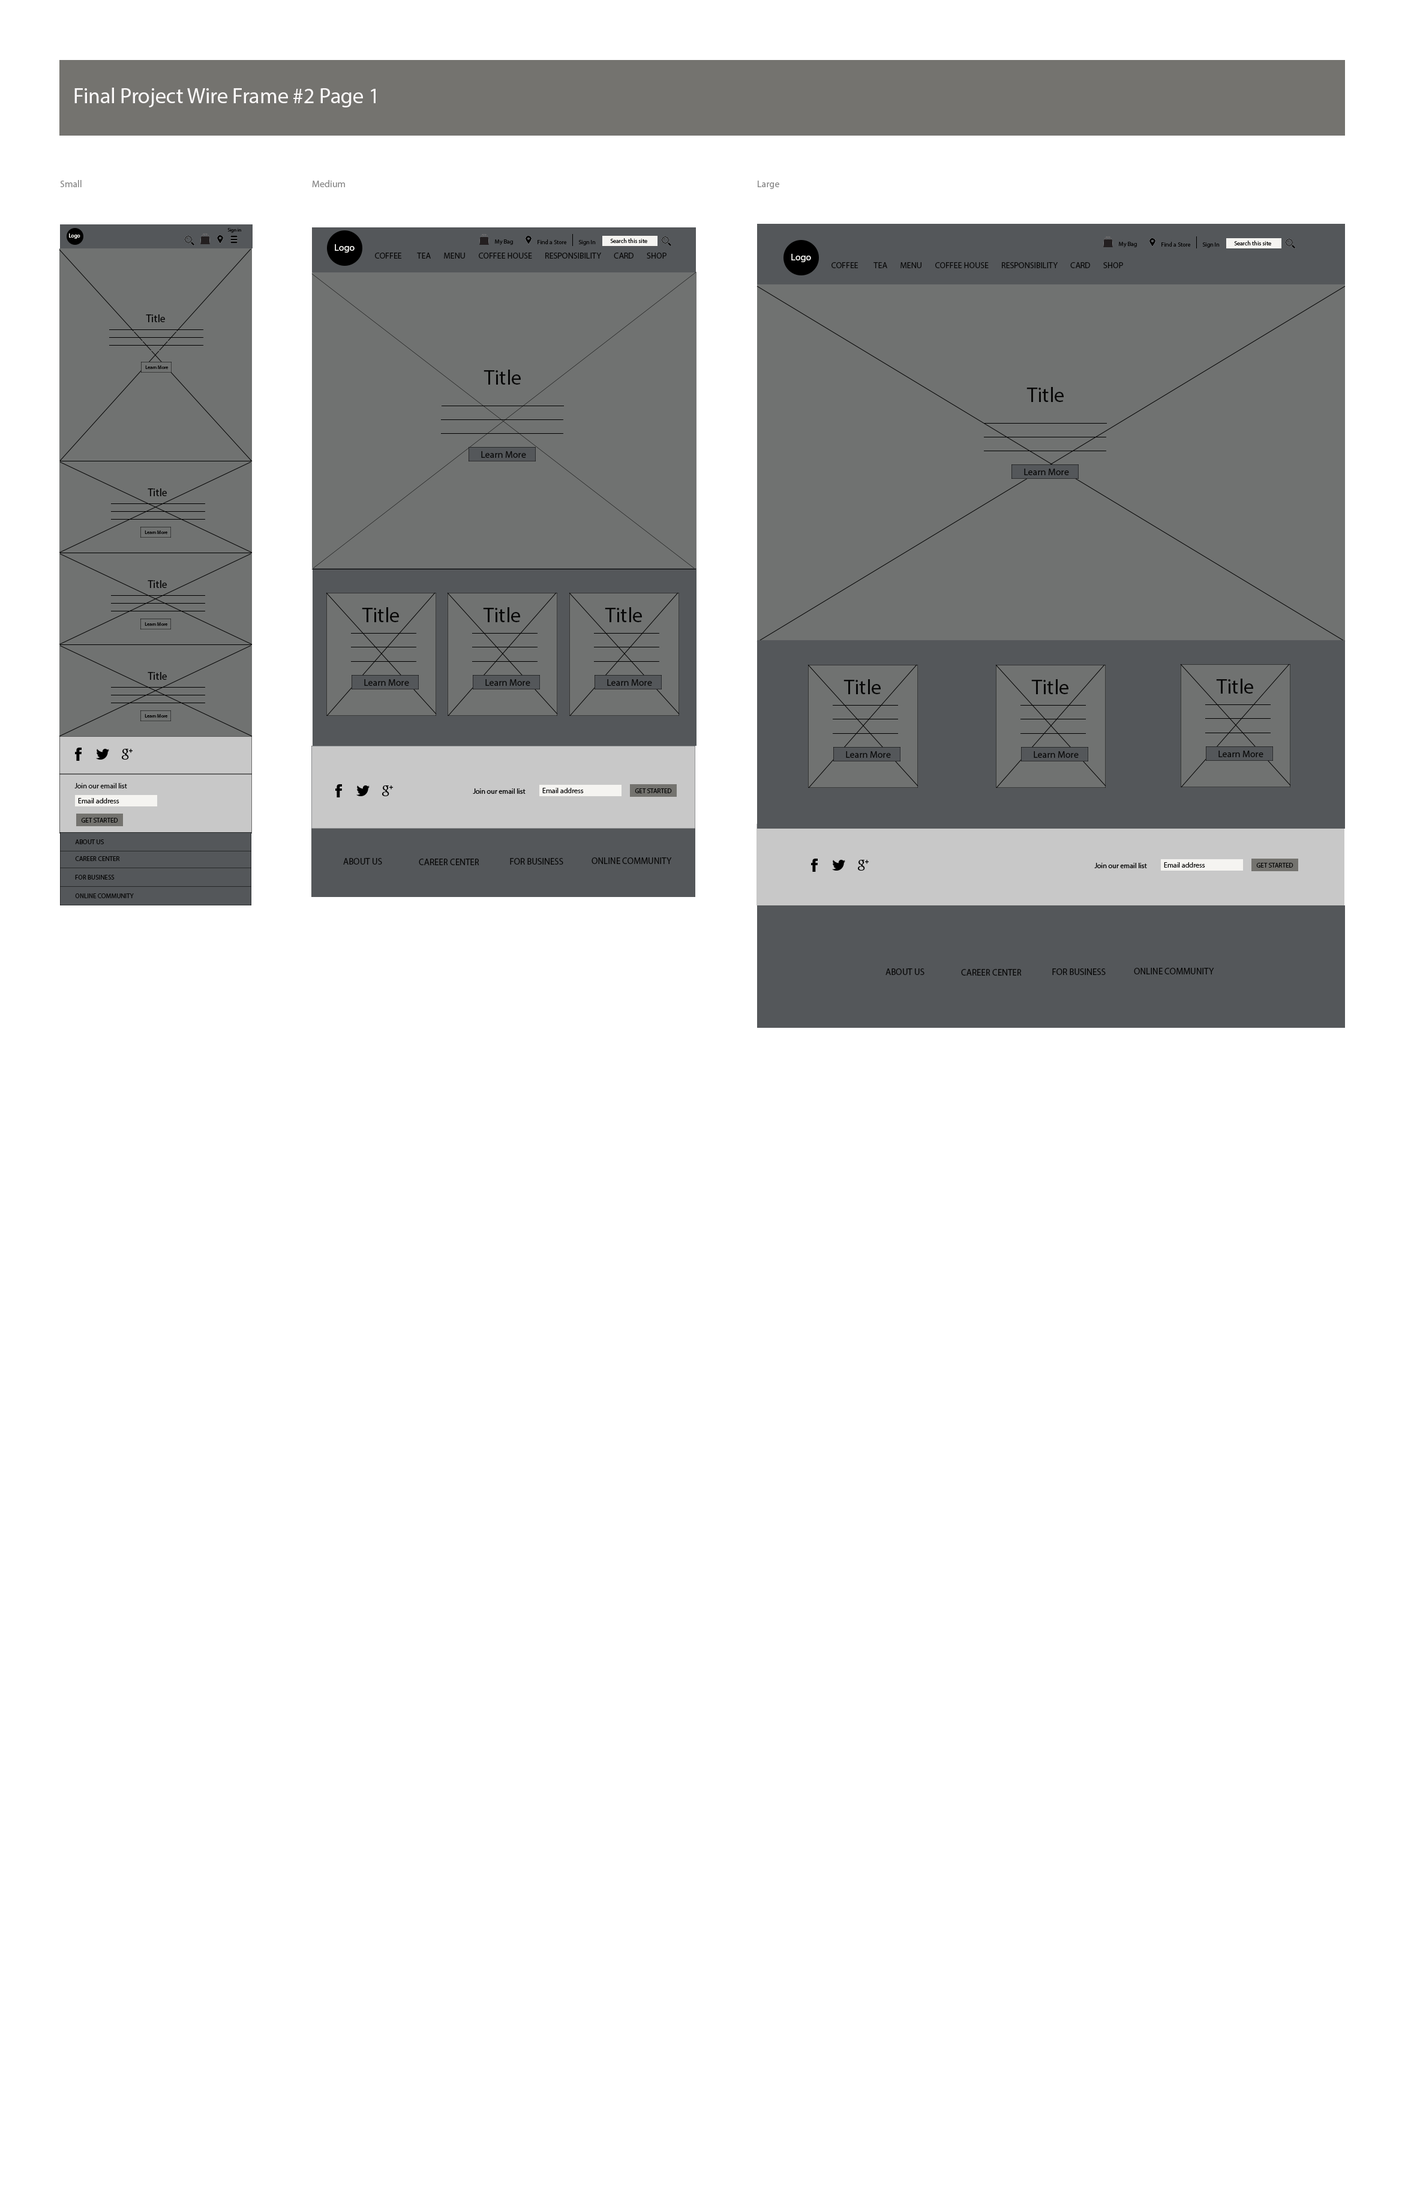
<style>
.page{position:relative;width:1405px;height:2196px;background:#ffffff}
.page>*{position:absolute;margin:0}
.t1{font:21.6px "MyriadPro-Regular";color:#fbf9f9}
.t2{font:9.6px "MyriadPro-Regular";color:#878787}
.t3{font:5.4px "MyriadPro-Regular";color:#f8f7f3}
.t4{font:4.8px "MyriadPro-Regular";color:#080808}
.t5{font:9.6px "MyriadPro-Regular";color:#fbfaf7}
.t6{font:6px "MyriadPro-Regular";color:#080808}
.t7{font:8.4px "MyriadPro-Regular";color:#080808}
.t8{font:10.8px "MyriadPro-Regular";color:#080808}
.t9{font:21px "MyriadPro-Regular";color:#080808}
.t10{font:9.6px "MyriadPro-Regular";color:#080808}
.t11{font:7.2px "MyriadPro-Regular";color:#080808}
.t12{font:6.6px "MyriadPro-Regular";color:#080808}
.t13{font:9px "MyriadPro-Regular";color:#080808}
</style>
<div class="page">
<p class="t1" style="left:74px;top:88px;width:302px;height:19px">Final Project Wire Frame #2 Page 1</p>
<p class="t2" style="left:60px;top:180px;width:22px;height:7px">Small</p>
<p class="t2" style="left:312px;top:180px;width:33px;height:7px">Medium</p>
<p class="t2" style="left:758px;top:181px;width:21px;height:8px">Large</p>
<p class="t3" style="left:69px;top:233px;width:11px;height:6px">Logo</p>
<p class="t4" style="left:227px;top:228px;width:14px;height:5px">Sign in</p>
<p class="t5" style="left:335px;top:244px;width:20px;height:9px">Logo</p>
<p class="t6" style="left:495px;top:239px;width:18px;height:6px">My Bag</p>
<p class="t6" style="left:538px;top:239px;width:29px;height:5px">Find a Store</p>
<p class="t6" style="left:578px;top:240px;width:18px;height:5px">Sign In</p>
<p class="t6" style="left:610px;top:238px;width:37px;height:5px">Search this site</p>
<p class="t6" style="left:1119px;top:242px;width:18px;height:6px">My Bag</p>
<p class="t6" style="left:1162px;top:242px;width:29px;height:5px">Find a Store</p>
<p class="t6" style="left:1202px;top:242px;width:18px;height:6px">Sign In</p>
<p class="t6" style="left:1234px;top:241px;width:37px;height:4px">Search this site</p>
<p class="t7" style="left:375px;top:253px;width:27px;height:6px">COFFEE</p>
<p class="t7" style="left:417px;top:253px;width:14px;height:6px">TEA</p>
<p class="t7" style="left:444px;top:253px;width:21px;height:6px">MENU</p>
<p class="t7" style="left:479px;top:253px;width:53px;height:6px">COFFEE HOUSE</p>
<p class="t7" style="left:545px;top:253px;width:56px;height:6px">RESPONSIBILITY</p>
<p class="t7" style="left:614px;top:253px;width:20px;height:6px">CARD</p>
<p class="t7" style="left:647px;top:253px;width:20px;height:6px">SHOP</p>
<p class="t5" style="left:791px;top:254px;width:20px;height:8px">Logo</p>
<p class="t7" style="left:832px;top:262px;width:27px;height:6px">COFFEE</p>
<p class="t7" style="left:874px;top:262px;width:13px;height:6px">TEA</p>
<p class="t7" style="left:901px;top:262px;width:21px;height:6px">MENU</p>
<p class="t7" style="left:935px;top:262px;width:54px;height:6px">COFFEE HOUSE</p>
<p class="t7" style="left:1002px;top:262px;width:56px;height:6px">RESPONSIBILITY</p>
<p class="t7" style="left:1070px;top:262px;width:20px;height:6px">CARD</p>
<p class="t7" style="left:1103px;top:262px;width:20px;height:6px">SHOP</p>
<p class="t8" style="left:146px;top:314px;width:19px;height:8px">Title</p>
<p class="t4" style="left:145px;top:365px;width:24px;height:5px">Learn More</p>
<p class="t9" style="left:484px;top:370px;width:37px;height:15px">Title</p>
<p class="t9" style="left:1027px;top:387px;width:37px;height:15px">Title</p>
<p class="t10" style="left:481px;top:451px;width:45px;height:7px">Learn More</p>
<p class="t10" style="left:1024px;top:469px;width:45px;height:6px">Learn More</p>
<p class="t8" style="left:148px;top:488px;width:19px;height:8px">Title</p>
<p class="t4" style="left:145px;top:530px;width:23px;height:5px">Learn More</p>
<p class="t8" style="left:148px;top:580px;width:19px;height:8px">Title</p>
<p class="t9" style="left:362px;top:607px;width:37px;height:15px">Title</p>
<p class="t9" style="left:483px;top:607px;width:37px;height:15px">Title</p>
<p class="t9" style="left:605px;top:607px;width:37px;height:15px">Title</p>
<p class="t4" style="left:145px;top:622px;width:23px;height:4px">Learn More</p>
<p class="t8" style="left:148px;top:672px;width:19px;height:8px">Title</p>
<p class="t10" style="left:364px;top:679px;width:45px;height:7px">Learn More</p>
<p class="t10" style="left:485px;top:679px;width:45px;height:7px">Learn More</p>
<p class="t10" style="left:607px;top:679px;width:45px;height:7px">Learn More</p>
<p class="t9" style="left:844px;top:679px;width:37px;height:15px">Title</p>
<p class="t9" style="left:1031px;top:679px;width:38px;height:15px">Title</p>
<p class="t9" style="left:1216px;top:679px;width:37px;height:15px">Title</p>
<p class="t4" style="left:145px;top:714px;width:23px;height:4px">Learn More</p>
<p class="t10" style="left:846px;top:751px;width:45px;height:7px">Learn More</p>
<p class="t10" style="left:1034px;top:751px;width:45px;height:7px">Learn More</p>
<p class="t10" style="left:1219px;top:751px;width:45px;height:6px">Learn More</p>
<p class="t11" style="left:74px;top:783px;width:53px;height:5px">Join our email list</p>
<p class="t12" style="left:75px;top:839px;width:29px;height:5px">ABOUT US</p>
<p class="t12" style="left:75px;top:856px;width:45px;height:5px">CAREER CENTER</p>
<p class="t13" style="left:592px;top:857px;width:80px;height:7px">ONLINE COMMUNITY</p>
<p class="t13" style="left:343px;top:858px;width:39px;height:7px">ABOUT US</p>
<p class="t13" style="left:419px;top:859px;width:60px;height:6px">CAREER CENTER</p>
<p class="t13" style="left:510px;top:858px;width:53px;height:7px">FOR BUSINESS</p>
<p class="t12" style="left:75px;top:875px;width:40px;height:5px">FOR BUSINESS</p>
<p class="t12" style="left:75px;top:893px;width:59px;height:5px">ONLINE COMMUNITY</p>
<p class="t13" style="left:886px;top:968px;width:39px;height:7px">ABOUT US</p>
<p class="t13" style="left:961px;top:969px;width:61px;height:7px">CAREER CENTER</p>
<p class="t13" style="left:1052px;top:968px;width:54px;height:7px">FOR BUSINESS</p>
<p class="t13" style="left:1134px;top:968px;width:80px;height:6px">ONLINE COMMUNITY</p>
</div>
